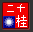
<style>
.page{position:relative;width:33px;height:32px;background:#f20000}
.page>*{position:absolute;margin:0}
.t1{font:10.4px "SimSun";color:#ffffff}
.t2{font:11.7px "SimSun";color:#ffffff}
</style>
<div class="page">
<p class="t1" style="left:7px;top:4px;width:18px;height:8px">二十</p>
<p class="t2" style="left:16px;top:15px;width:11px;height:12px">桂</p>
</div>
